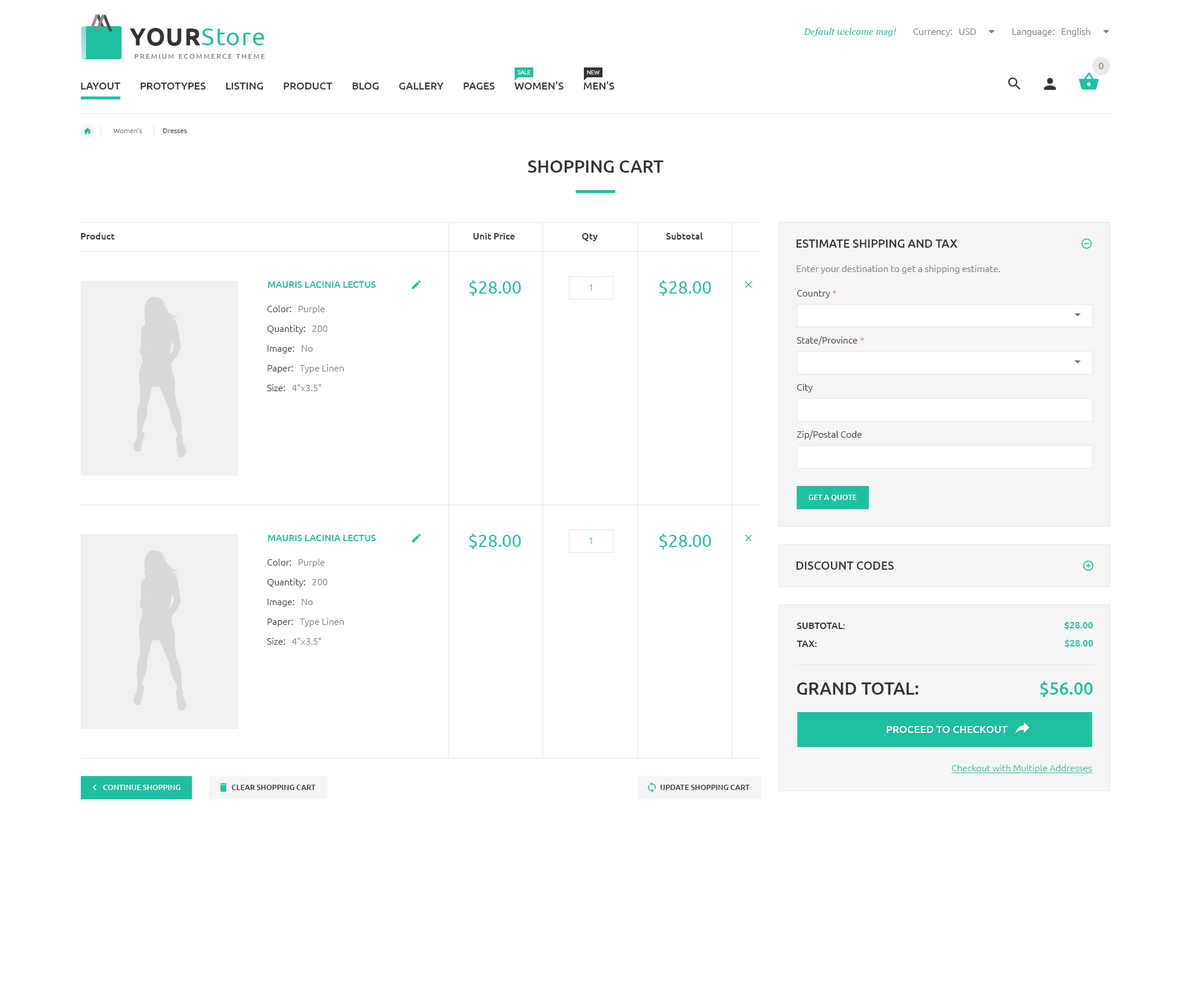
<style>
.page{position:relative;width:1191px;height:1001px;background:#ffffff}
.page>*{position:absolute;margin:0}
.t1{font:24.4px "Ubuntu";letter-spacing:0.04em;color:#1fc0a0}
.t2{font:24.4px "Ubuntu-Bold";letter-spacing:0.04em;color:#333333;text-transform:uppercase}
.t3{font:9.3px "Georgia-Italic";color:#1fc0a0}
.t4{font:9.3px "Ubuntu-Light";color:#777777}
.t5{font:7px "Ubuntu";letter-spacing:0.2em;color:#777777;text-transform:uppercase}
.t6{font:9.3px "Ubuntu";color:#777777}
.t7{font:5.8px "Ubuntu-Light";color:#ffffff;text-transform:uppercase}
.t8{font:10.5px "Ubuntu-Medium";color:#333333;text-transform:uppercase}
.t9{font:7px "Ubuntu-Light";color:#777777}
.t10{font:7px "Ubuntu-Light";color:#333333}
.t11{font:17.4px "Ubuntu-Medium";color:#333333;text-transform:uppercase}
.t12{font:9.3px "Ubuntu-Medium";color:#333333}
.t13{font:11.6px "Ubuntu-Medium";color:#333333;text-transform:uppercase}
.t14{font:9.3px "Ubuntu-Medium";color:#1fc0a0;text-transform:uppercase}
.t15{font:17.4px "Ubuntu";color:#1fc0a0;text-transform:uppercase}
.t16{font:9.3px "Ubuntu-Light";color:#1fc0a0}
.t17{font:9.3px "Ubuntu-Light";color:#333333}
.t18{font:9.3px "Ubuntu-Light";color:#fa6b6b}
.t19{font:9.3px/19.8px "Ubuntu-Light";color:#777777}
.t20{font:9.3px/19.8px "Ubuntu-Light";color:#333333}
.t21{font:7.6px "Ubuntu-Medium";color:#ffffff;text-transform:uppercase}
.t22{font:9.3px "Ubuntu-Medium";color:#333333;text-transform:uppercase}
.t23{font:17.4px "Ubuntu-Medium";color:#1fc0a0;text-transform:uppercase}
.t24{font:10.5px "Ubuntu-Medium";color:#ffffff;text-transform:uppercase}
.t25{font:9.3px "Ubuntu-Light";color:#1fc0a0;text-decoration:underline}
.t26{font:7.6px "Ubuntu-Medium";color:#333333;text-transform:uppercase}
</style>
<div class="page">
<p class="t1" style="left:130px;top:28px;width:135px;height:18px"><span class="t2">Your</span>Store</p>
<p class="t3" style="left:803px;top:28px;width:93px;height:9px">Default welcome msg!</p>
<p class="t4" style="left:913px;top:28px;width:63px;height:9px">Currency:   USD</p>
<p class="t4" style="left:1012px;top:28px;width:78px;height:9px">Language:   English</p>
<p class="t5" style="left:134px;top:54px;width:131px;height:5px">Premium ecommerce theme</p>
<p class="t6" style="left:1098px;top:63px;width:6px;height:6px">0</p>
<p class="t7" style="left:518px;top:70px;width:12px;height:4px">sale</p>
<p class="t7" style="left:587px;top:70px;width:13px;height:4px">New</p>
<p class="t8" style="left:81px;top:81px;width:534px;height:9px">LAYOUT        Prototypes        LISTING        PRODUCT        BLOG        GALLERY        PAGES        WOMEN’s        MEN’s</p>
<p class="t9" style="left:113px;top:128px;width:29px;height:5px">Women’s</p>
<p class="t10" style="left:163px;top:129px;width:24px;height:4px">Dresses</p>
<p class="t11" style="left:528px;top:160px;width:135px;height:13px">SHOPPING CART</p>
<p class="t12" style="left:81px;top:233px;width:34px;height:7px">Product</p>
<p class="t12" style="left:473px;top:233px;width:42px;height:7px">Unit Price</p>
<p class="t12" style="left:582px;top:233px;width:16px;height:8px">Qty</p>
<p class="t12" style="left:666px;top:233px;width:37px;height:7px">Subtotal</p>
<p class="t13" style="left:796px;top:240px;width:161px;height:8px">ESTIMATE SHIPPING AND TAX</p>
<p class="t4" style="left:797px;top:265px;width:203px;height:9px">Enter your destination to get a shipping estimate.</p>
<p class="t14" style="left:268px;top:281px;width:108px;height:7px">Mauris lacinia lectus</p>
<p class="t15" style="left:469px;top:280px;width:52px;height:16px">$28.00</p>
<p class="t15" style="left:659px;top:280px;width:52px;height:16px">$28.00</p>
<p class="t16" style="left:589px;top:284px;width:3px;height:7px">1</p>
<p class="t17" style="left:797px;top:290px;width:39px;height:8px">Country <span class="t18">*</span></p>
<p class="t19" style="left:267px;top:305px;width:77px;height:86px"><span class="t20">Color:   </span>Purple  <br><span class="t20">Quantity:   </span>200 <br><span class="t20">Image:   </span>No  <br><span class="t20">Paper:</span>   Type Linen <br><span class="t20">Size:   </span>4"x3.5"</p>
<p class="t17" style="left:797px;top:336px;width:67px;height:9px">State/Province <span class="t18">*</span></p>
<p class="t17" style="left:797px;top:384px;width:15px;height:8px">City</p>
<p class="t17" style="left:797px;top:430px;width:65px;height:10px">Zip/Postal Code</p>
<p class="t21" style="left:808px;top:495px;width:49px;height:6px">Get a quote</p>
<p class="t15" style="left:469px;top:534px;width:52px;height:15px">$28.00</p>
<p class="t15" style="left:659px;top:534px;width:52px;height:15px">$28.00</p>
<p class="t14" style="left:268px;top:535px;width:108px;height:6px">Mauris lacinia lectus</p>
<p class="t16" style="left:589px;top:538px;width:3px;height:6px">1</p>
<p class="t19" style="left:267px;top:559px;width:77px;height:86px"><span class="t20">Color:   </span>Purple  <br><span class="t20">Quantity:   </span>200 <br><span class="t20">Image:   </span>No  <br><span class="t20">Paper:</span>   Type Linen <br><span class="t20">Size:   </span>4"x3.5"</p>
<p class="t13" style="left:796px;top:562px;width:98px;height:8px">DISCOUNT CODES</p>
<p class="t22" style="left:797px;top:623px;width:48px;height:6px">Subtotal:</p>
<p class="t14" style="left:1064px;top:622px;width:29px;height:8px">$28.00</p>
<p class="t22" style="left:797px;top:641px;width:20px;height:6px">Tax:</p>
<p class="t14" style="left:1065px;top:640px;width:28px;height:8px">$28.00</p>
<p class="t11" style="left:797px;top:683px;width:121px;height:12px">GRAND TOTAL:</p>
<p class="t23" style="left:1040px;top:681px;width:53px;height:16px">$56.00</p>
<p class="t24" style="left:886px;top:726px;width:122px;height:7px">PROCEED TO CHECKOUT</p>
<p class="t25" style="left:951px;top:765px;width:141px;height:8px">Checkout with Multiple Addresses</p>
<p class="t21" style="left:103px;top:785px;width:77px;height:5px">CONTINUE SHOPPING</p>
<p class="t26" style="left:231px;top:785px;width:85px;height:5px">CLEAR SHOPPING CART</p>
<p class="t26" style="left:660px;top:785px;width:90px;height:5px">UPDATE SHOPPING CART</p>
</div>
